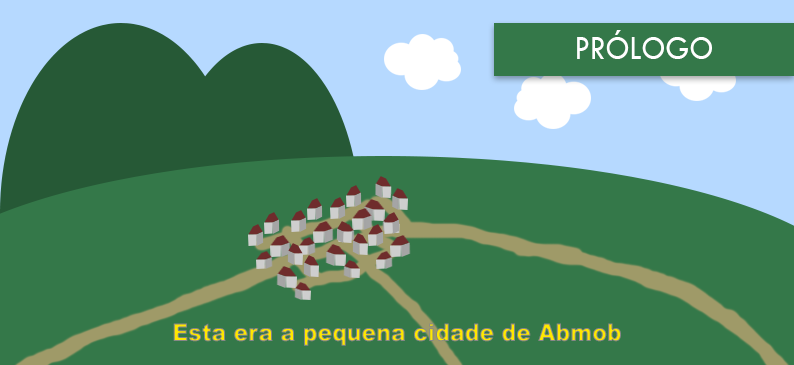
<style>
.page{position:relative;width:794px;height:365px;background:#347849}
.page>*{position:absolute;margin:0}
.t1{font:34.7px "TwCenMT-Regular";color:#ffffff;scale:0.9 1}
.t2{font:34.7px "TwCenMT-Regular";color:#000000;scale:0.9 1}
.t3{font:24.5px "Arial-Black";scale:0.9 1}
</style>
<div class="page">
<p class="t1" style="left:577px;top:30px;width:135px;height:29px"><span class="t2"><br></span>PRÓLOGO</p>
<p class="t3" style="left:173px;top:323px;width:448px;height:23px">Esta era a pequena cidade de Abmob</p>
</div>
